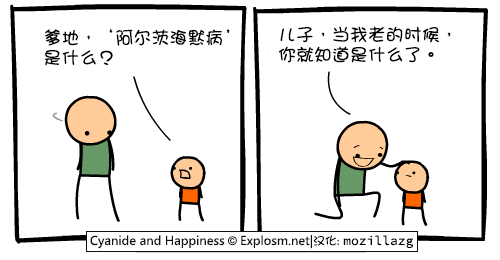
<style>
.page{position:relative;width:500px;height:260px;background:#ffffff}
.page>*{position:absolute;margin:0}
.t1{font:18px/20px "DFGirl";color:#000000}
</style>
<div class="page">
<p class="t1" style="left:44px;top:29px;width:186px;height:37px">爹地，‘阿尔茨海默病’<br>是什么？</p>
<p class="t1" style="left:278px;top:26px;width:173px;height:37px">儿子，当我老的时候，<br>你就知道是什么了。</p>
</div>
